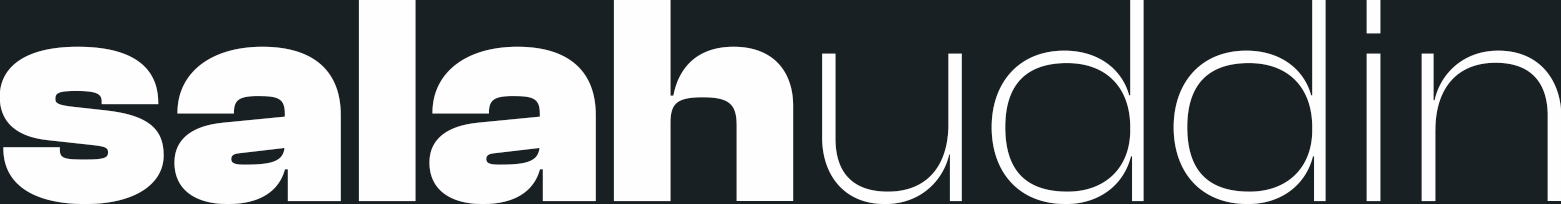
<style>
.page{position:relative;width:1561px;height:204px;background:#192024}
.page>*{position:absolute;margin:0}
.t1{font:300px "ClashDisplay-Bold";letter-spacing:0.005em;color:#fffefe}
.t2{font:300px "ClashDisplay-Light";letter-spacing:0.005em;color:#fffefe}
</style>
<div class="page">
<p class="t1" style="left:0px;top:0px;width:1562px;height:204px">salah<span class="t2">uddin</span></p>
</div>
